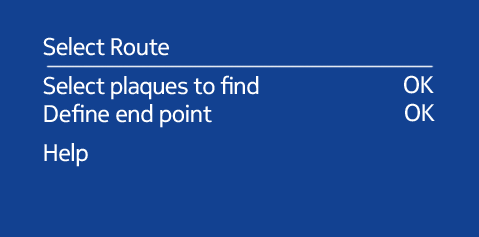
<style>
.page{position:relative;width:479px;height:237px;background:#124191}
.page>*{position:absolute;margin:0}
.t1{font:24px "NokiaPureHeadline-Regular";color:#ffffff}
.t2{font:24px "NokiaPureHeadline-Regular";letter-spacing:0.005em;color:#ffffff}
</style>
<div class="page">
<p class="t1" style="left:43px;top:37px;width:126px;height:19px">Select Route</p>
<p class="t1" style="left:43px;top:75px;width:216px;height:25px">Select plaques to find</p>
<p class="t1" style="left:404px;top:75px;width:30px;height:19px">OK</p>
<p class="t2" style="left:44px;top:103px;width:168px;height:25px">Define end point</p>
<p class="t1" style="left:405px;top:103px;width:30px;height:19px">OK</p>
<p class="t1" style="left:44px;top:143px;width:44px;height:24px">Help</p>
</div>
